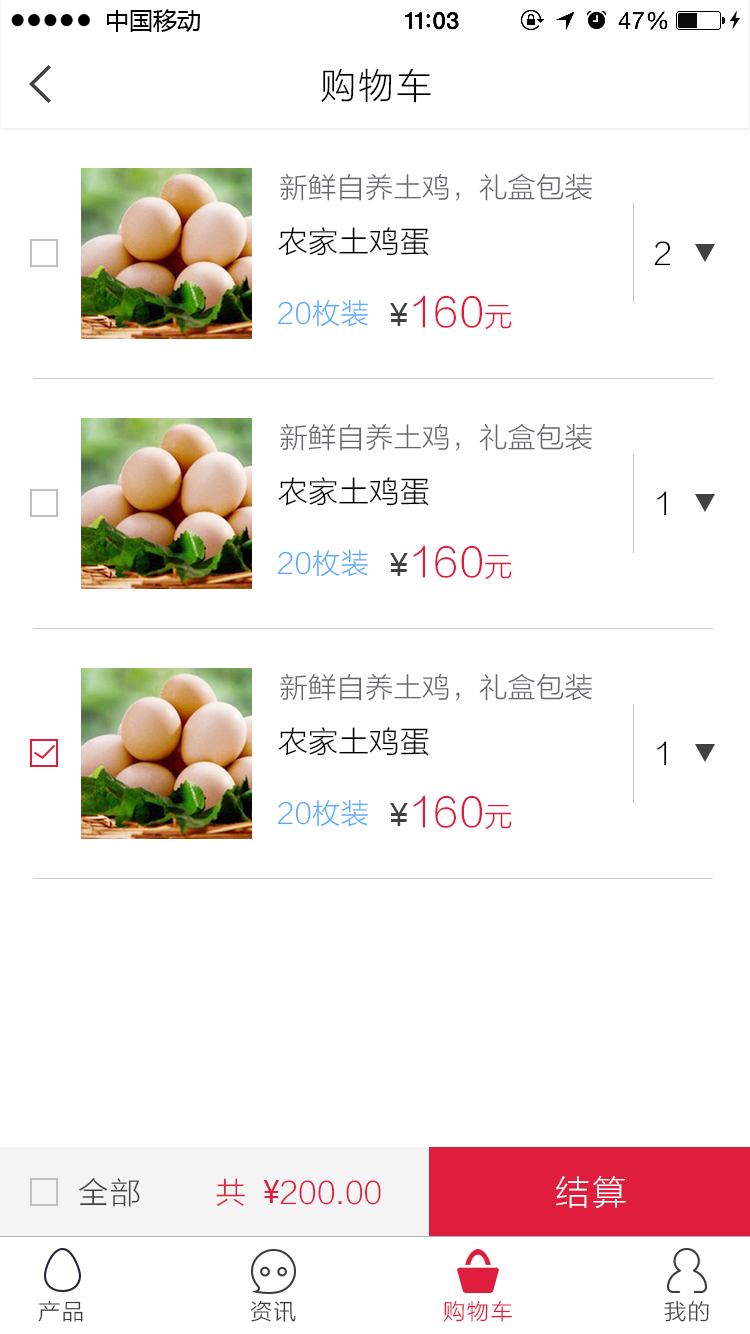
<style>
.page{position:relative;width:750px;height:1334px;background:#ffffff}
.page>*{position:absolute;margin:0}
.t1{font:35.7px "STHeitiSC-Light";color:#000000}
.t2{font:28px "STHeitiSC-Light";letter-spacing:-0.06em;color:#63666b}
.t3{font:30px "STHeitiSC-Light";letter-spacing:-0.06em;color:#000000}
.t4{font:28px "STHeitiSC-Light";letter-spacing:-0.06em;color:#5aabfd}
.t5{font:40px "STHeitiSC-Light";letter-spacing:-0.06em;color:#df1e3e}
.t6{font:32px "DokChampa";color:#414141}
.t7{font:28px "STHeitiSC-Light";letter-spacing:-0.06em;color:#df1e3e}
.t8{font:30px "STHeitiSC-Light";color:#414141}
.t9{font:30px "STHeitiSC-Light";letter-spacing:-0.06em;color:#df1e3e}
.t10{font:30px "MicrosoftYaHei";letter-spacing:-0.06em;color:#df1e3e}
.t11{font:34px "STHeitiSC-Light";color:#ffffff}
</style>
<div class="page">
<p class="t1" style="left:321px;top:68px;width:110px;height:35px">购物车</p>
<p class="t2" style="left:280px;top:173px;width:312px;height:28px">新鲜自养土鸡，礼盒包装</p>
<p class="t3" style="left:278px;top:227px;width:151px;height:29px">农家土鸡蛋</p>
<p class="t3" style="left:654px;top:241px;width:17px;height:25px">2</p>
<p class="t4" style="left:277px;top:299px;width:91px;height:28px">20枚装</p>
<p class="t5" style="left:390px;top:295px;width:122px;height:35px"><span class="t6">¥</span>160<span class="t7">元</span></p>
<p class="t2" style="left:280px;top:423px;width:312px;height:28px">新鲜自养土鸡，礼盒包装</p>
<p class="t3" style="left:278px;top:477px;width:151px;height:29px">农家土鸡蛋</p>
<p class="t3" style="left:657px;top:491px;width:10px;height:25px">1</p>
<p class="t5" style="left:390px;top:545px;width:122px;height:35px"><span class="t6">¥</span>160<span class="t7">元</span></p>
<p class="t4" style="left:277px;top:549px;width:91px;height:28px">20枚装</p>
<p class="t2" style="left:280px;top:673px;width:312px;height:28px">新鲜自养土鸡，礼盒包装</p>
<p class="t3" style="left:278px;top:727px;width:151px;height:29px">农家土鸡蛋</p>
<p class="t3" style="left:657px;top:741px;width:10px;height:25px">1</p>
<p class="t5" style="left:390px;top:795px;width:122px;height:35px"><span class="t6">¥</span>160<span class="t7">元</span></p>
<p class="t4" style="left:277px;top:799px;width:91px;height:28px">20枚装</p>
<p class="t8" style="left:79px;top:1178px;width:61px;height:29px">全部</p>
<p class="t9" style="left:216px;top:1178px;width:165px;height:28px">共  <span class="t10">¥</span>200.00</p>
<p class="t11" style="left:556px;top:1176px;width:70px;height:32px">结算</p>
</div>
